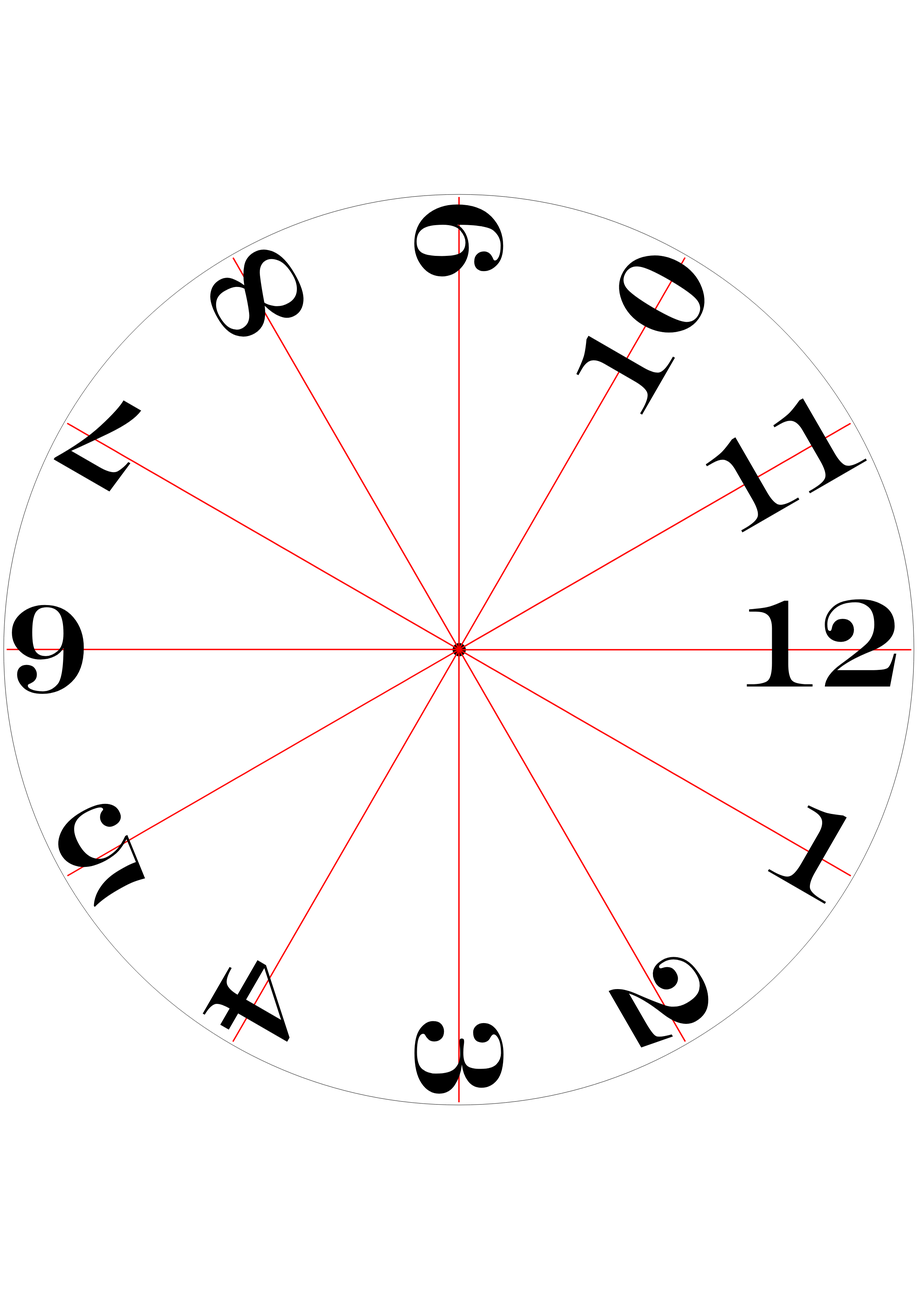
<style>
.page{position:relative;width:918px;height:1299px;background:#ffffff}
.page>*{position:absolute;margin:0}
.t1{font:125.9px "Engry";color:#000000}
</style>
<div class="page">
<p class="t1" style="left:414px;top:204px;width:90px;height:73px;rotate:-90deg">9</p>
<p class="t1" style="left:210px;top:250px;width:94px;height:87px;rotate:-120deg">8</p>
<p class="t1" style="left:576px;top:255px;width:129px;height:160px;rotate:-60deg">10</p>
<p class="t1" style="left:54px;top:400px;width:87px;height:92px;rotate:-150deg">7</p>
<p class="t1" style="left:706px;top:398px;width:161px;height:134px;rotate:-30deg">11</p>
<p class="t1" style="left:12px;top:605px;width:72px;height:89px;rotate:-180deg">6</p>
<p class="t1" style="left:747px;top:599px;width:150px;height:87px">12</p>
<p class="t1" style="left:58px;top:803px;width:87px;height:104px;rotate:150deg">5</p>
<p class="t1" style="left:768px;top:805px;width:79px;height:99px;rotate:30deg">1</p>
<p class="t1" style="left:203px;top:960px;width:87px;height:82px;rotate:120deg">4</p>
<p class="t1" style="left:609px;top:957px;width:100px;height:90px;rotate:60deg">2</p>
<p class="t1" style="left:414px;top:1021px;width:90px;height:73px;rotate:90deg">3</p>
</div>
